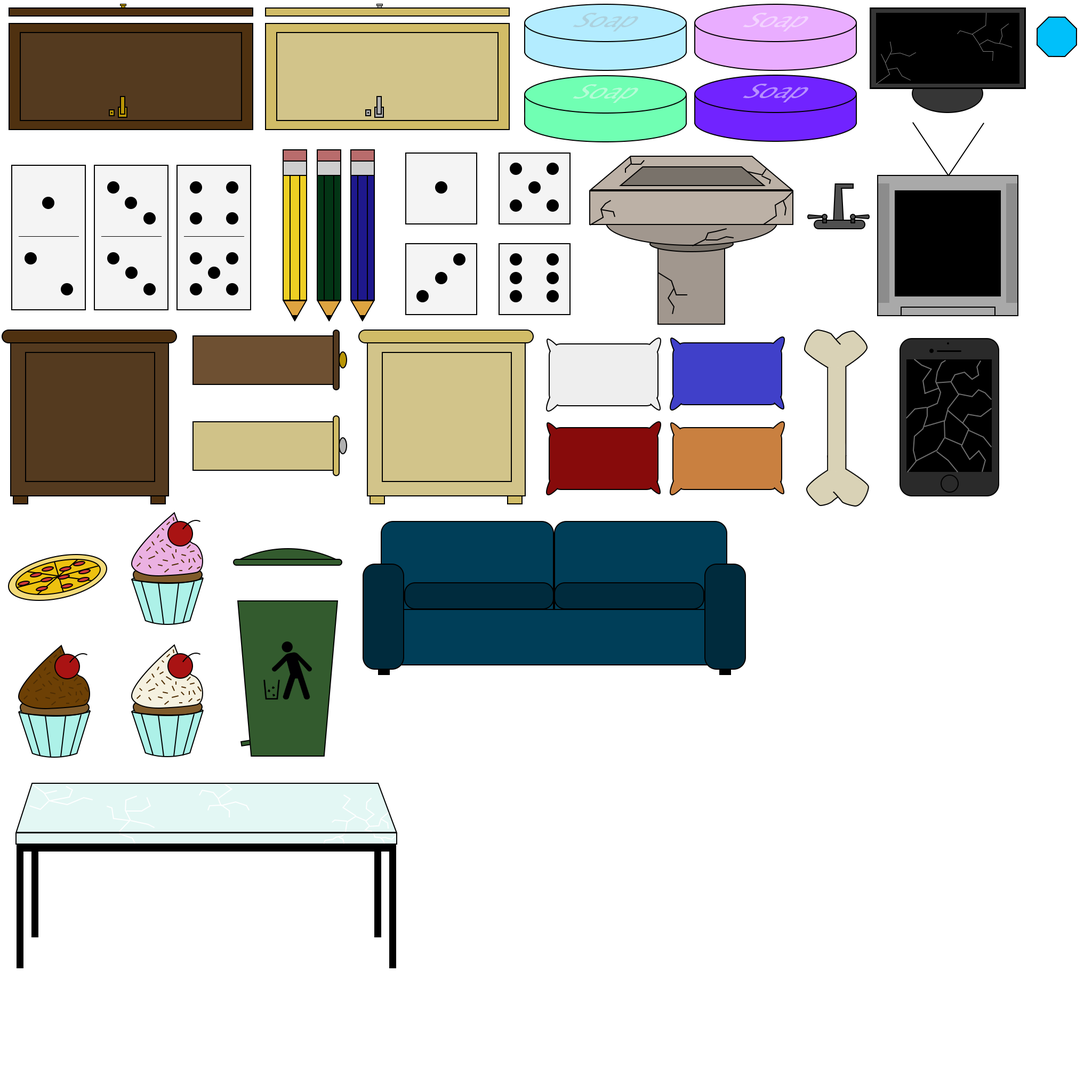
<style>
.page{position:relative;width:1092px;height:1092px;background:#ffffff}
.page>*{position:absolute;margin:0}
.t1{font:28.6px "LucidaSansUnicode";color:#acd1de;scale:0.9 1}
.t2{font:28.6px "LucidaSansUnicode";color:#f3d3ff;scale:0.9 1}
.t3{font:28.6px "LucidaSansUnicode";color:#b5fcd6;scale:0.9 1}
.t4{font:28.6px "LucidaSansUnicode";color:#b78fff;scale:0.9 1}
</style>
<div class="page">
<p class="t1" style="left:573px;top:13px;width:65px;height:18px">Soap</p>
<p class="t2" style="left:743px;top:13px;width:65px;height:18px">Soap</p>
<p class="t3" style="left:573px;top:84px;width:65px;height:19px">Soap</p>
<p class="t4" style="left:743px;top:84px;width:65px;height:18px">Soap</p>
</div>
